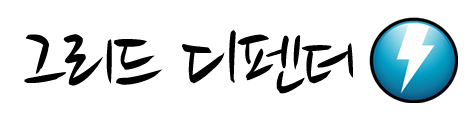
<style>
.page{position:relative;width:472px;height:118px;background:#ffffff}
.page>*{position:absolute;margin:0}
.t1{font:96.8px "NanumBrush";letter-spacing:-0.05em;color:#000000}
</style>
<div class="page">
<p class="t1" style="left:24px;top:30px;width:329px;height:64px">그리드 디펜더</p>
</div>
